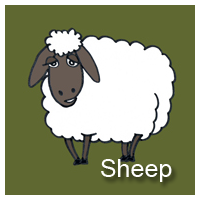
<style>
.page{position:relative;width:200px;height:200px;background:#5f6831}
.page>*{position:absolute;margin:0}
.t1{font:25px "ArialMT";color:#ffffff}
</style>
<div class="page">
<p class="t1" style="left:101px;top:159px;width:71px;height:23px">Sheep</p>
</div>
